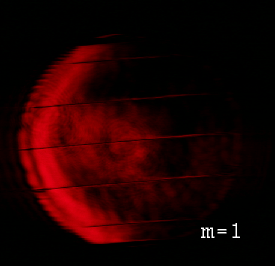
<style>
.page{position:relative;width:275px;height:266px;background:#000000}
.page>*{position:absolute;margin:0}
.t1{font:24px "Courier";color:#ffffff}
</style>
<div class="page">
<p class="t1" style="left:201px;top:219px;width:53px;height:34px">m=1</p>
</div>
